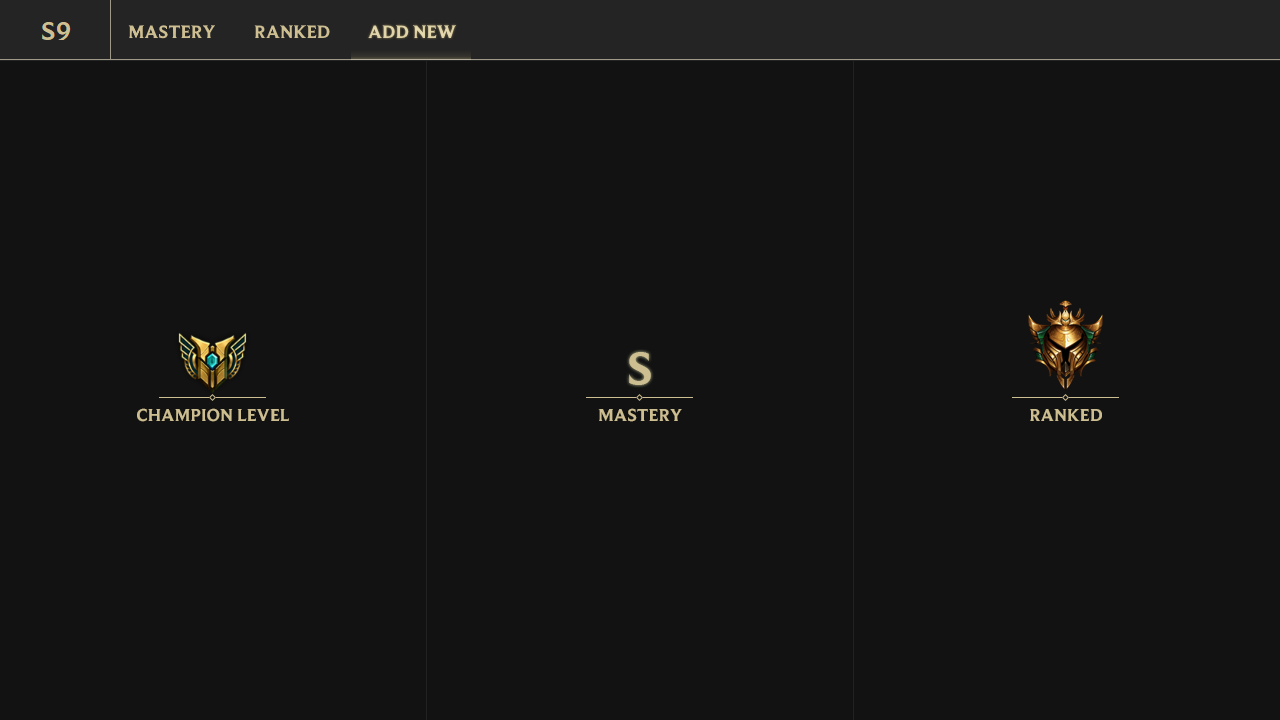
<style>
.page{position:relative;width:1280px;height:720px;background:#121212}
.page>*{position:absolute;margin:0}
.t1{font:48px "BeaufortforLOL-Bold";color:#cdbe91}
.t2{font:18px "BeaufortforLOL-Bold";color:#cdbe91}
</style>
<div class="page">
<p class="t1" style="left:629px;top:352px;width:22px;height:33px">S</p>
<p class="t2" style="left:137px;top:408px;width:152px;height:14px">CHAMPION LEVEL</p>
<p class="t2" style="left:598px;top:408px;width:84px;height:14px">MASTERY</p>
<p class="t2" style="left:1030px;top:409px;width:72px;height:12px">RANKED</p>
</div>
